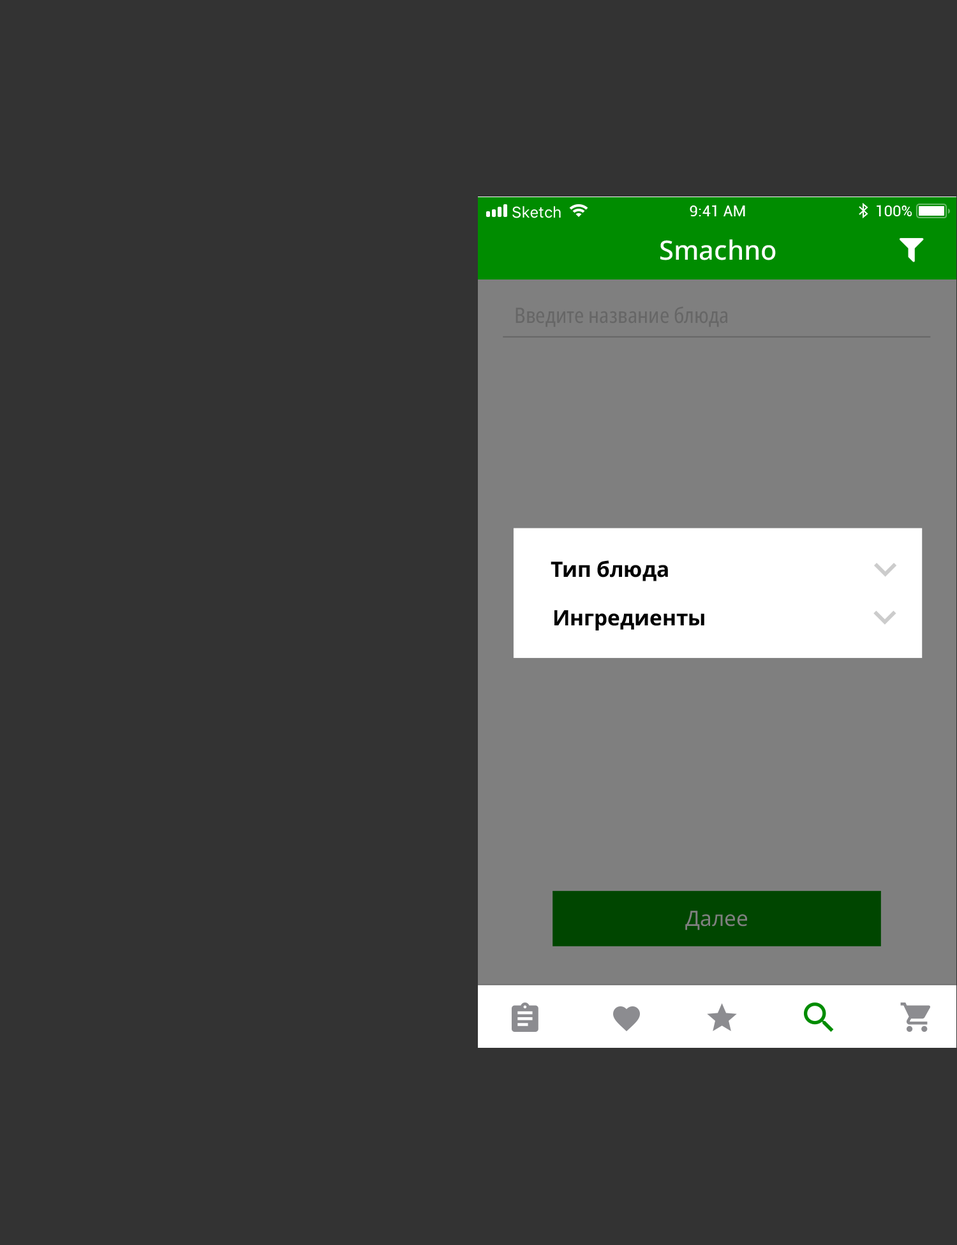
<style>
.page{position:relative;width:957px;height:1245px;background:#333333}
.page>*{position:absolute;margin:0}
.t1{font:26.6px "NotoSans-Medium";color:#ffffff}
.t2{font:21.3px "NotoSans-Condensed";color:#666666}
.t3{font:21.3px "NotoSans-Bold";color:#000000}
.t4{font:21.3px "NotoSans-Regular";color:#7f7f7f}
</style>
<div class="page">
<p class="t1" style="left:661px;top:239px;width:115px;height:21px">Smachno</p>
<p class="t2" style="left:516px;top:306px;width:212px;height:21px">Введите название блюда</p>
<p class="t3" style="left:551px;top:560px;width:117px;height:22px">Тип блюда</p>
<p class="t3" style="left:555px;top:610px;width:150px;height:21px">Ингредиенты</p>
<p class="t4" style="left:686px;top:911px;width:61px;height:20px">Далее</p>
</div>
